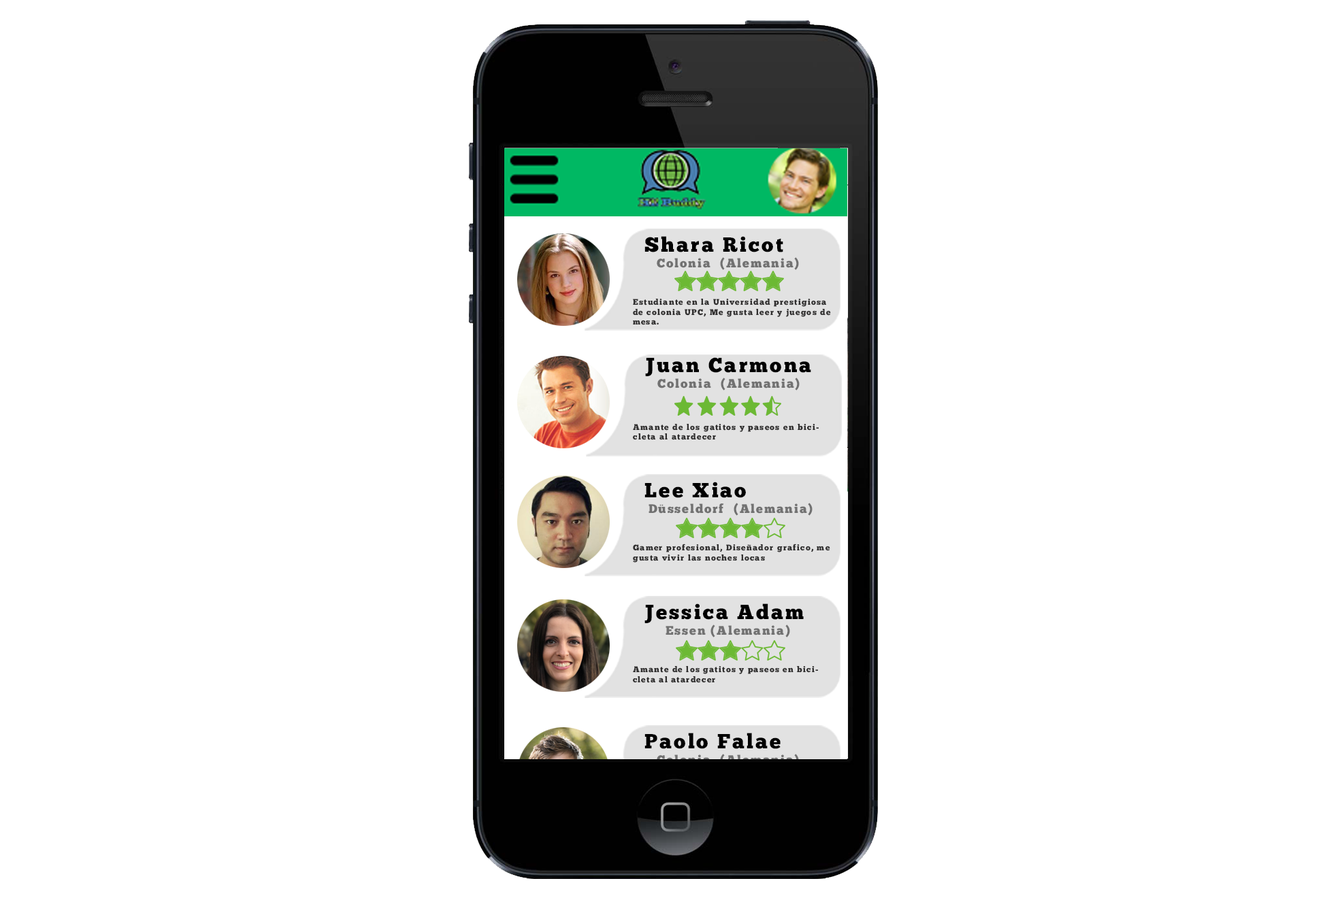
<style>
.page{position:relative;width:1327px;height:898px;background:#ffffff}
.page>*{position:absolute;margin:0}
.t1{font:20.4px "ChunkFive-Roman";letter-spacing:0.1em;color:#000000}
.t2{font:12.4px "ChunkFive-Roman";letter-spacing:0.1em;color:#717171}
.t3{font:8.2px "ChunkFive-Roman";letter-spacing:0.1em;color:#313030}
</style>
<div class="page">
<p class="t1" style="left:645px;top:236px;width:138px;height:17px">Shara Ricot</p>
<p class="t2" style="left:657px;top:257px;width:142px;height:13px">Colonia  (Alemania)</p>
<p class="t3" style="left:633px;top:299px;width:198px;height:26px">Estudiante en la Universidad prestigiosa de colonia UPC, Me gusta leer y juegos de mesa.</p>
<p class="t1" style="left:645px;top:357px;width:166px;height:19px">Juan Carmona</p>
<p class="t2" style="left:657px;top:378px;width:143px;height:13px">Colonia  (Alemania)</p>
<p class="t3" style="left:633px;top:424px;width:186px;height:16px">Amante de los gatitos y paseos en bicicleta al atardecer</p>
<p class="t1" style="left:645px;top:482px;width:101px;height:16px">Lee Xiao</p>
<p class="t2" style="left:649px;top:503px;width:164px;height:13px">Düsseldorf  (Alemania)</p>
<p class="t3" style="left:633px;top:544px;width:197px;height:19px">Gamer profesional, Diseñador grafico, me gusta vivir las noches locas</p>
<p class="t1" style="left:645px;top:604px;width:159px;height:19px">Jessica Adam</p>
<p class="t2" style="left:666px;top:625px;width:124px;height:13px">Essen (Alemania)</p>
<p class="t3" style="left:633px;top:666px;width:185px;height:17px">Amante de los gatitos y paseos en bicicleta al atardecer</p>
<p class="t1" style="left:645px;top:733px;width:136px;height:16px">Paolo Falae</p>
</div>
